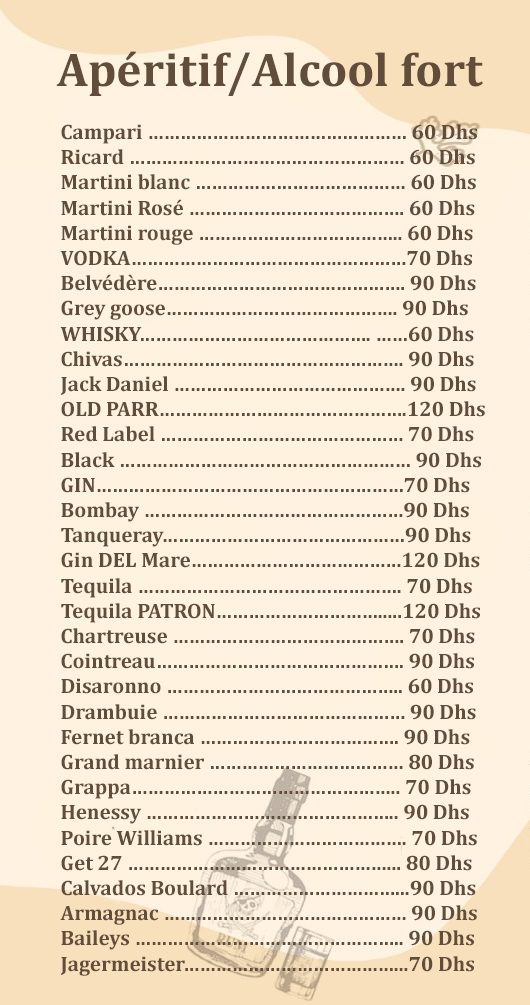
<style>
.page{position:relative;width:530px;height:1005px;background:#fff2e1}
.page>*{position:absolute;margin:0}
.t1{font:48px "Cambria-Bold";color:#624c3a}
.t2{font:21px "Cambria-Bold";color:#624c3a}
</style>
<div class="page">
<p class="t1" style="left:56px;top:51px;width:427px;height:45px">Apéritif/Alcool fort</p>
<p class="t2" style="left:60px;top:124px;width:425px;height:852px">Campari ………………………………………… 60 Dhs<br>Ricard …………………………………………… 60 Dhs<br>Martini blanc ………………………………… 60 Dhs<br>Martini Rosé …………………………………. 60 Dhs<br>Martini rouge ……………………………….. 60 Dhs<br>VODKA……………………………………………70 Dhs<br>Belvédère………………………………………. 90 Dhs<br>Grey goose……………………………………. 90 Dhs<br>WHISKY……………………………………. ……60 Dhs<br>Chivas……………………………………………. 90 Dhs<br>Jack Daniel ……………………………………. 90 Dhs<br>OLD PARR……………………………………….120 Dhs<br>Red Label ……………………………………… 70 Dhs<br>Black ……………………………………………… 90 Dhs<br>GIN…………………………………………………70 Dhs <br>Bombay …………………………………………90 Dhs<br>Tanqueray………………………………………90 Dhs<br>Gin DEL Mare…………………………………120 Dhs <br>Tequila …………………………………………. 70 Dhs<br>Tequila PATRON………………………….....120 Dhs<br>Chartreuse ……………………………………. 70 Dhs<br>Cointreau………………………………………. 90 Dhs<br>Disaronno …………………………………….. 60 Dhs<br>Drambuie ……………………………………… 90 Dhs<br>Fernet branca ………………………………. 90 Dhs<br>Grand marnier ……………………………… 80 Dhs<br>Grappa………………………………………….. 70 Dhs<br>Henessy ……………………………………….. 90 Dhs<br>Poire Williams ………………………………. 70 Dhs<br>Get 27 …………………………………………... 80 Dhs<br>Calvados Boulard …………………………...90 Dhs<br>Armagnac ……………………………………… 90 Dhs<br>Baileys ………………………………………….. 90 Dhs<br>Jagermeister…………………………………...70 Dhs</p>
</div>
